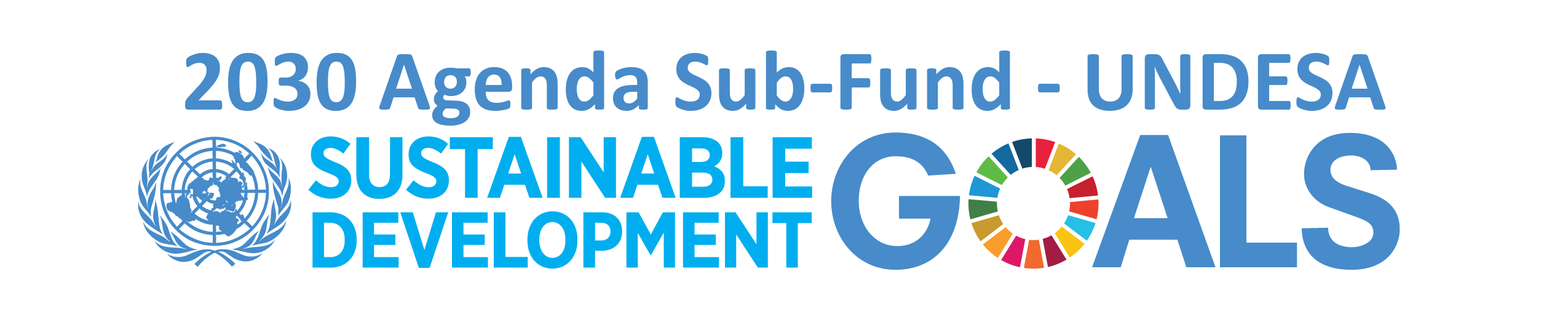
<style>
.page{position:relative;width:1568px;height:335px;background:#ffffff}
.page>*{position:absolute;margin:0}
.t1{font:87.5px "Calibri-Bold";color:#478bca}
</style>
<div class="page">
<p class="t1" style="left:185px;top:50px;width:1201px;height:75px">2030 Agenda Sub-Fund - UNDESA</p>
</div>
